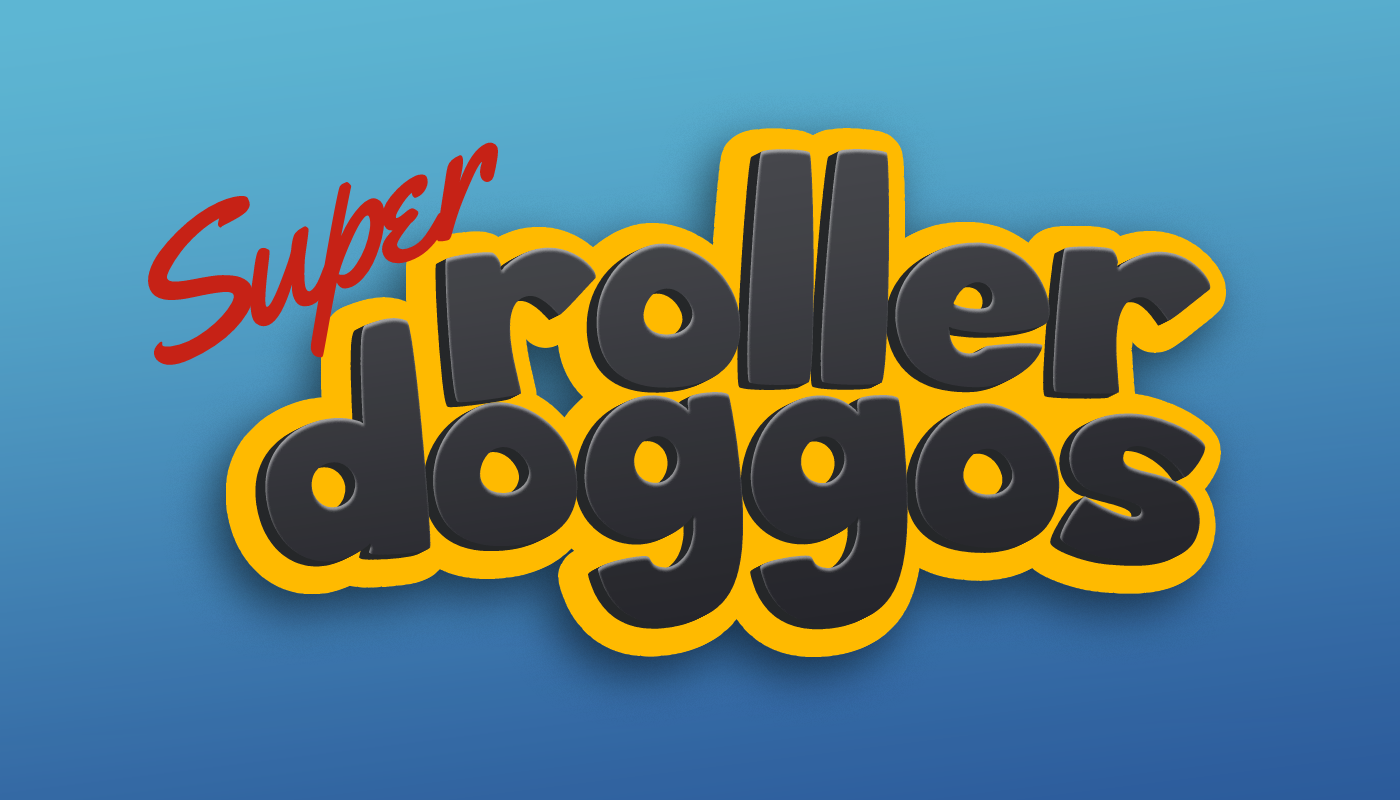
<style>
.page{position:relative;width:1400px;height:800px}
.page>*{position:absolute;margin:0}
.t1{font:182px "Yellowtail-Regular";color:#c62216;scale:1.1 1}
.t2{font:182px "Yellowtail-Regular";letter-spacing:-0.075em;color:#c62216;scale:1.1 1}
.t3{font:182px "Yellowtail-Regular";letter-spacing:-0.068em;color:#c62216;scale:1.1 1}
.t4{font:200px "Big-Bottom-Cartoon";color:#3c3c42}
.t5{font:200px "Big-Bottom-Cartoon";color:#3c3d42}
.t6{font:200px "Big-Bottom-Cartoon";color:#3b3b40}
.t7{font:200px "Big-Bottom-Cartoon";color:#3a3b40}
.t8{font:200px "Big-Bottom-Cartoon";color:#3b3b41}
.t9{font:200px "Big-Bottom-Cartoon";color:#3b3c41}
.t10{font:200px "Big-Bottom-Cartoon";color:#252729}
.t11{font:200px "Big-Bottom-Cartoon";color:#2d2e33}
.t12{font:200px "Big-Bottom-Cartoon";color:#2d2d33}
</style>
<div class="page">
<p class="t1" style="left:146px;top:142px;width:353px;height:227px;rotate:-24deg"><span class="t2">S</span>u<span class="t3">p</span>er</p>
<p class="t4" style="left:443px;top:150px;width:766px;height:254px">roller</p>
<p class="t5" style="left:445px;top:149px;width:766px;height:254px">roller</p>
<p class="t6" style="left:431px;top:156px;width:766px;height:254px">roller</p>
<p class="t7" style="left:433px;top:155px;width:766px;height:254px">roller</p>
<p class="t7" style="left:435px;top:154px;width:766px;height:254px">roller</p>
<p class="t8" style="left:437px;top:153px;width:766px;height:254px">roller</p>
<p class="t9" style="left:439px;top:152px;width:766px;height:254px">roller</p>
<p class="t9" style="left:441px;top:151px;width:766px;height:254px">roller</p>
<p class="t10" style="left:265px;top:318px;width:941px;height:307px">doggos</p>
<p class="t11" style="left:251px;top:325px;width:941px;height:307px">doggos</p>
<p class="t11" style="left:253px;top:324px;width:941px;height:307px">doggos</p>
<p class="t12" style="left:255px;top:323px;width:941px;height:307px">doggos</p>
<p class="t11" style="left:257px;top:322px;width:941px;height:307px">doggos</p>
<p class="t10" style="left:259px;top:321px;width:941px;height:307px">doggos</p>
<p class="t10" style="left:261px;top:320px;width:941px;height:307px">doggos</p>
<p class="t10" style="left:263px;top:319px;width:941px;height:307px">doggos</p>
</div>
